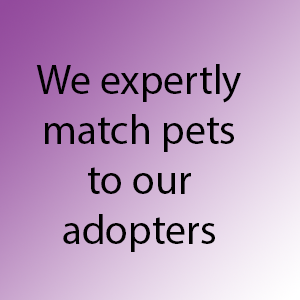
<style>
.page{position:relative;width:300px;height:300px}
.page>*{position:absolute;margin:0}
.t1{font:41.7px "MyriadPro-Regular";color:#000000}
</style>
<div class="page">
<p class="t1" style="left:36px;top:64px;width:205px;height:188px;text-align:center">We expertly<br>match pets<br>to our<br>adopters</p>
</div>
